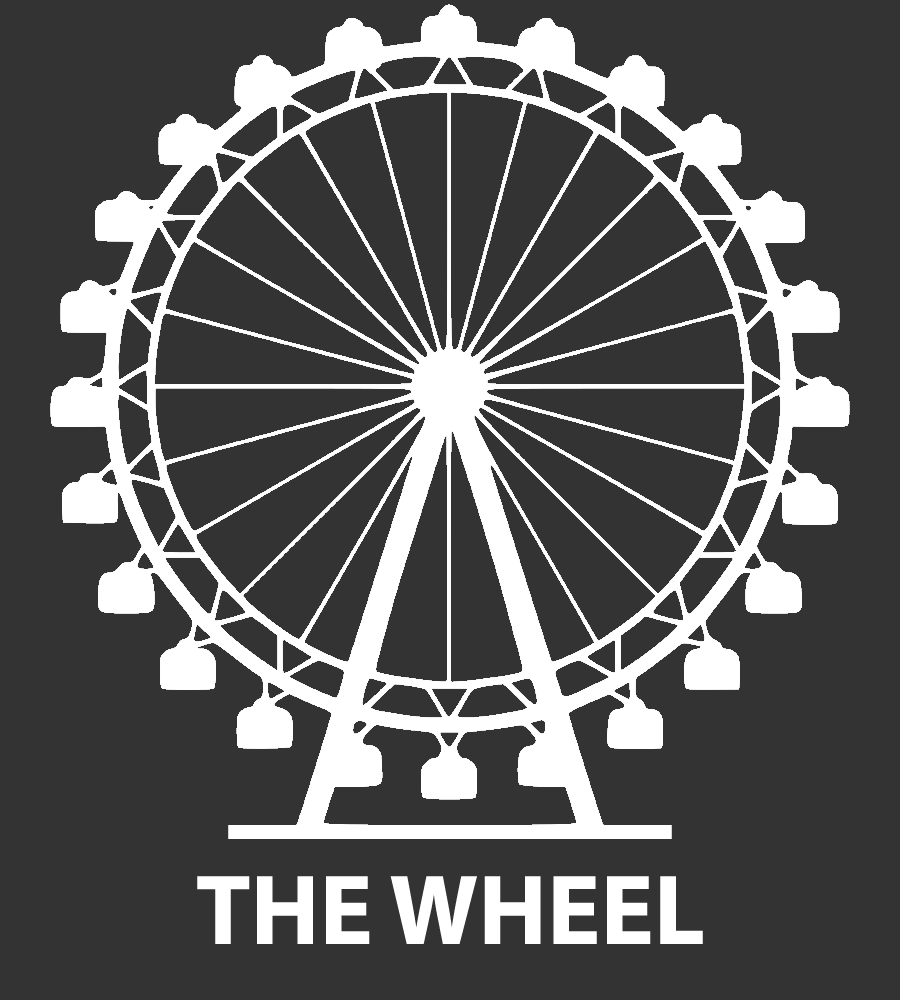
<style>
.page{position:relative;width:900px;height:1000px;background:#333333}
.page>*{position:absolute;margin:0}
.t1{font:100px "MyriadPro-Bold";color:#ffffff}
</style>
<div class="page">
<p class="t1" style="left:197px;top:876px;width:506px;height:68px">THE WHEEL</p>
</div>
